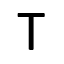
<style>
.page{position:relative;width:64px;height:64px;background:#ffffff}
.page>*{position:absolute;margin:0}
.t1{font:58.3px "Calibri";color:#000000}
</style>
<div class="page">
<p class="t1" style="left:17px;top:13px;width:28px;height:37px">Т</p>
</div>
